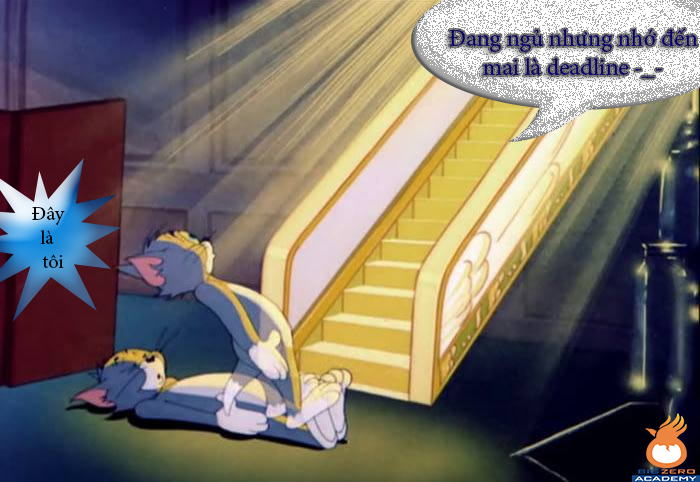
<style>
.page{position:relative;width:700px;height:482px}
.page>*{position:absolute;margin:0}
.t1{font:24px "MinionPro-Regular";color:#05006d}
.t2{font:20px "MinionPro-Regular";color:#000000}
</style>
<div class="page">
<p class="t1" style="left:449px;top:28px;width:249px;height:50px;text-align:center">Đang ngủ nhưng nhớ đến <br>mai là deadline -_-</p>
<p class="t2" style="left:32px;top:206px;width:33px;height:62px;text-align:center">Đây <br>là <br>tôi</p>
</div>
